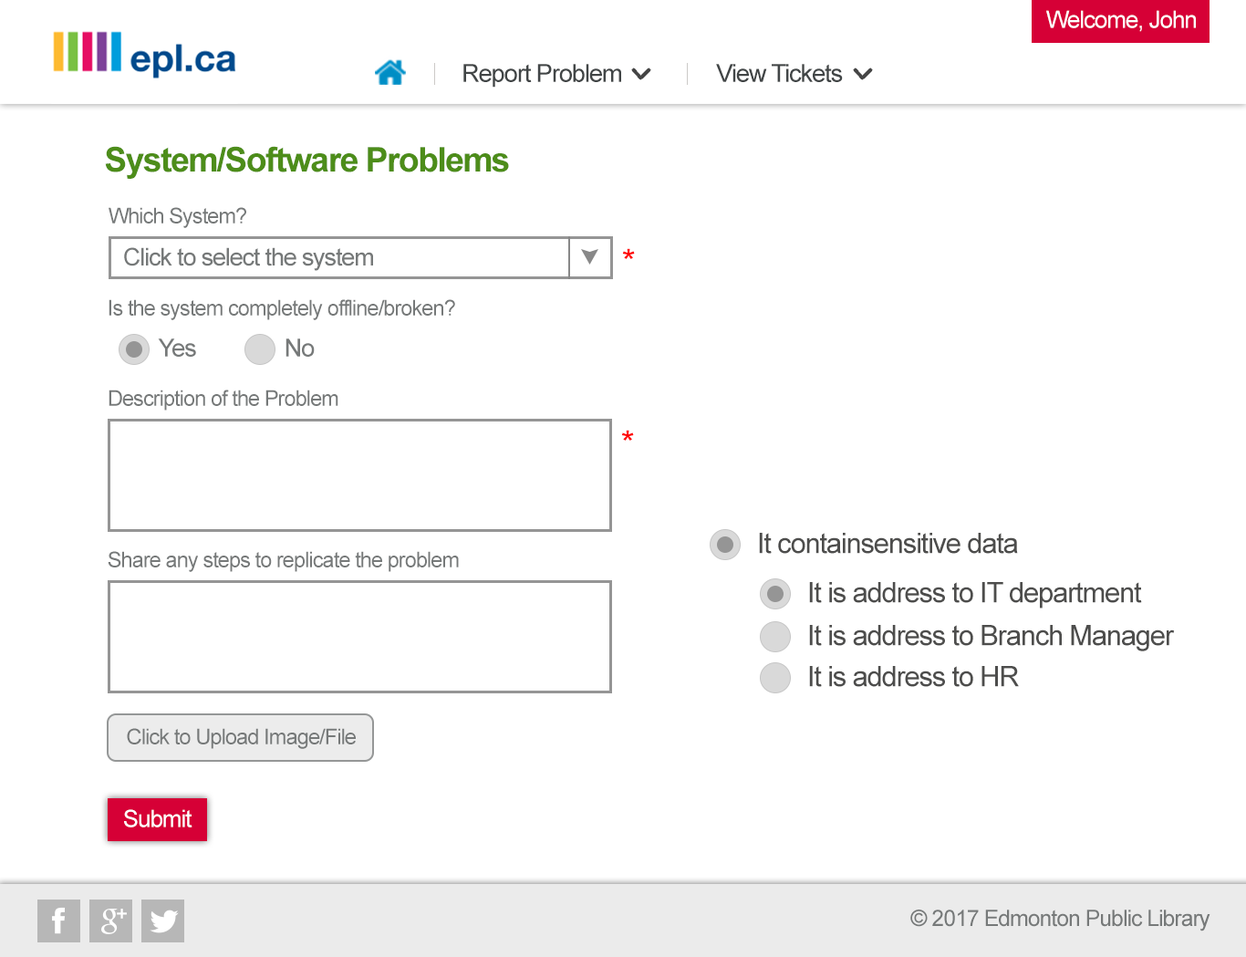
<style>
.page{position:relative;width:1246px;height:957px;background:#ffffff}
.page>*{position:absolute;margin:0}
.t1{font:23.7px "ArialMT";letter-spacing:-0.04em;color:#ffffff}
.t2{font:24.9px "ArialMT";letter-spacing:-0.04em;color:#414546}
.t3{font:33.9px "Arial-BoldMT";letter-spacing:-0.04em;color:#4d8d1a}
.t4{font:21.5px "ArialMT";letter-spacing:-0.04em;color:#767979}
.t5{font:24.4px "ArialMT";letter-spacing:-0.04em;color:#767979}
.t6{font:33.9px "ArialMT";letter-spacing:-0.04em;color:#ff0000}
.t7{font:24.9px "ArialMT";letter-spacing:-0.04em;color:#767979}
.t8{font:28.3px "ArialMT";letter-spacing:-0.04em;color:#4d4d4c}
.t9{font:21.6px "ArialMT";letter-spacing:-0.04em;color:#767979}
.t10{font:22.6px "ArialMT";letter-spacing:-0.04em;color:#767979}
</style>
<div class="page">
<p class="t1" style="left:1046px;top:10px;width:150px;height:22px">Welcome, John</p>
<p class="t2" style="left:463px;top:64px;width:158px;height:24px">Report Problem</p>
<p class="t2" style="left:716px;top:64px;width:127px;height:18px">View Tickets</p>
<p class="t3" style="left:105px;top:146px;width:404px;height:33px">System/Software Problems</p>
<p class="t4" style="left:109px;top:207px;width:137px;height:21px">Which System?</p>
<p class="t5" style="left:124px;top:247px;width:249px;height:24px">Click to select the system</p>
<p class="t6" style="left:622px;top:248px;width:13px;height:11px">*</p>
<p class="t4" style="left:109px;top:299px;width:346px;height:21px">Is the system completely offline/broken?</p>
<p class="t7" style="left:158px;top:338px;width:38px;height:19px">Yes</p>
<p class="t7" style="left:286px;top:338px;width:29px;height:19px">No</p>
<p class="t4" style="left:109px;top:390px;width:229px;height:21px">Description of the Problem</p>
<p class="t6" style="left:621px;top:430px;width:13px;height:11px">*</p>
<p class="t8" style="left:759px;top:533px;width:259px;height:21px">It containsensitive data</p>
<p class="t4" style="left:108px;top:551px;width:351px;height:21px">Share any steps to replicate the problem</p>
<p class="t8" style="left:809px;top:582px;width:333px;height:26px">It is address to IT department</p>
<p class="t8" style="left:809px;top:625px;width:366px;height:26px">It is address to Branch Manager</p>
<p class="t8" style="left:809px;top:666px;width:210px;height:21px">It is address to HR</p>
<p class="t9" style="left:127px;top:728px;width:229px;height:21px">Click to Upload Image/File</p>
<p class="t1" style="left:124px;top:809px;width:68px;height:18px">Submit</p>
<p class="t10" style="left:910px;top:909px;width:301px;height:22px">© 2017 Edmonton Public Library</p>
</div>
